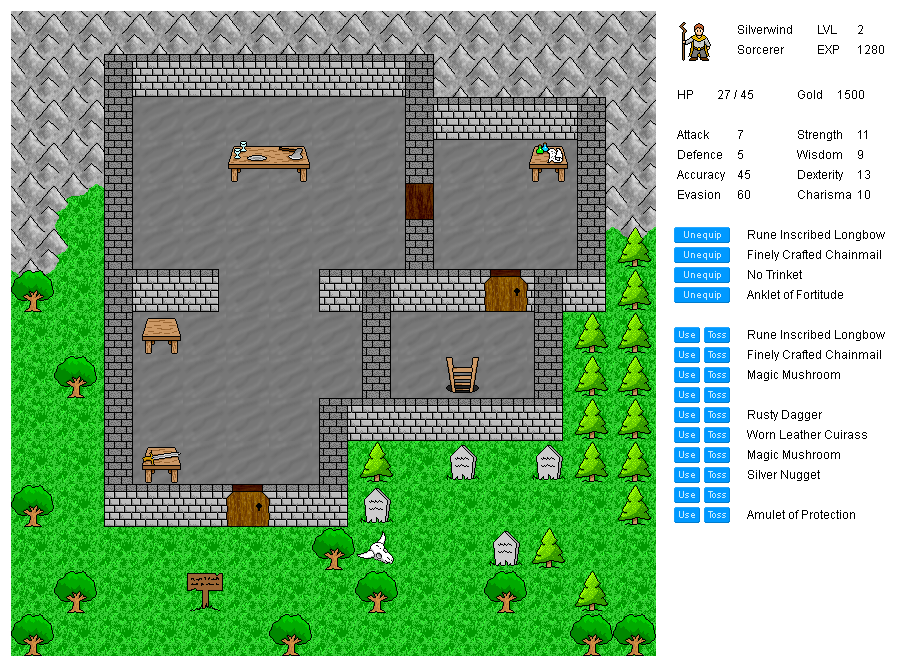
<style>
.page{position:relative;width:917px;height:667px;background:#ffffff}
.page>*{position:absolute;margin:0}
.t1{font:12px "ArialMT";color:#000000}
.t2{font:10px "ArialMT";color:#ccebff}
</style>
<div class="page">
<p class="t1" style="left:738px;top:25px;width:54px;height:9px">Silverwind</p>
<p class="t1" style="left:818px;top:25px;width:19px;height:9px">LVL</p>
<p class="t1" style="left:858px;top:25px;width:5px;height:9px">2</p>
<p class="t1" style="left:738px;top:45px;width:46px;height:9px">Sorcerer</p>
<p class="t1" style="left:818px;top:45px;width:21px;height:9px">EXP</p>
<p class="t1" style="left:858px;top:45px;width:26px;height:9px">1280</p>
<p class="t1" style="left:678px;top:90px;width:15px;height:9px">HP</p>
<p class="t1" style="left:718px;top:90px;width:35px;height:9px">27 / 45</p>
<p class="t1" style="left:798px;top:90px;width:24px;height:9px">Gold</p>
<p class="t1" style="left:838px;top:90px;width:26px;height:9px">1500</p>
<p class="t1" style="left:677px;top:130px;width:32px;height:9px">Attack</p>
<p class="t1" style="left:738px;top:130px;width:5px;height:9px">7</p>
<p class="t1" style="left:798px;top:130px;width:44px;height:11px">Strength</p>
<p class="t1" style="left:858px;top:130px;width:9px;height:9px">11</p>
<p class="t1" style="left:678px;top:150px;width:44px;height:9px">Defence</p>
<p class="t1" style="left:738px;top:150px;width:5px;height:9px">5</p>
<p class="t1" style="left:797px;top:150px;width:45px;height:9px">Wisdom</p>
<p class="t1" style="left:858px;top:150px;width:5px;height:9px">9</p>
<p class="t1" style="left:677px;top:170px;width:48px;height:11px">Accuracy</p>
<p class="t1" style="left:738px;top:170px;width:12px;height:9px">45</p>
<p class="t1" style="left:798px;top:170px;width:45px;height:11px">Dexterity</p>
<p class="t1" style="left:858px;top:170px;width:12px;height:9px">13</p>
<p class="t1" style="left:678px;top:190px;width:42px;height:9px">Evasion</p>
<p class="t1" style="left:738px;top:190px;width:12px;height:9px">60</p>
<p class="t1" style="left:798px;top:190px;width:53px;height:9px">Charisma</p>
<p class="t1" style="left:858px;top:190px;width:12px;height:9px">10</p>
<p class="t2" style="left:684px;top:231px;width:37px;height:9px">Unequip</p>
<p class="t1" style="left:748px;top:230px;width:137px;height:11px">Rune Inscribed Longbow</p>
<p class="t2" style="left:684px;top:251px;width:37px;height:9px">Unequip</p>
<p class="t1" style="left:748px;top:250px;width:133px;height:11px">Finely Crafted Chainmail</p>
<p class="t1" style="left:748px;top:270px;width:54px;height:9px">No Trinket</p>
<p class="t2" style="left:684px;top:271px;width:37px;height:9px">Unequip</p>
<p class="t2" style="left:684px;top:291px;width:37px;height:9px">Unequip</p>
<p class="t1" style="left:747px;top:290px;width:96px;height:9px">Anklet of Fortitude</p>
<p class="t2" style="left:679px;top:331px;width:16px;height:7px">Use</p>
<p class="t2" style="left:708px;top:331px;width:18px;height:7px">Toss</p>
<p class="t1" style="left:748px;top:330px;width:137px;height:11px">Rune Inscribed Longbow</p>
<p class="t2" style="left:679px;top:351px;width:16px;height:7px">Use</p>
<p class="t2" style="left:708px;top:351px;width:18px;height:7px">Toss</p>
<p class="t1" style="left:748px;top:350px;width:133px;height:11px">Finely Crafted Chainmail</p>
<p class="t2" style="left:679px;top:371px;width:16px;height:7px">Use</p>
<p class="t2" style="left:708px;top:371px;width:18px;height:7px">Toss</p>
<p class="t1" style="left:748px;top:370px;width:92px;height:11px">Magic Mushroom</p>
<p class="t2" style="left:679px;top:391px;width:16px;height:7px">Use</p>
<p class="t2" style="left:708px;top:391px;width:18px;height:7px">Toss</p>
<p class="t2" style="left:679px;top:411px;width:16px;height:7px">Use</p>
<p class="t2" style="left:708px;top:411px;width:18px;height:7px">Toss</p>
<p class="t1" style="left:748px;top:410px;width:74px;height:11px">Rusty Dagger</p>
<p class="t2" style="left:679px;top:431px;width:16px;height:7px">Use</p>
<p class="t2" style="left:708px;top:431px;width:18px;height:7px">Toss</p>
<p class="t1" style="left:747px;top:430px;width:120px;height:9px">Worn Leather Cuirass</p>
<p class="t2" style="left:679px;top:451px;width:16px;height:7px">Use</p>
<p class="t2" style="left:708px;top:451px;width:18px;height:7px">Toss</p>
<p class="t1" style="left:748px;top:450px;width:92px;height:11px">Magic Mushroom</p>
<p class="t2" style="left:679px;top:471px;width:16px;height:7px">Use</p>
<p class="t2" style="left:708px;top:471px;width:18px;height:7px">Toss</p>
<p class="t1" style="left:748px;top:470px;width:72px;height:11px">Silver Nugget</p>
<p class="t2" style="left:679px;top:491px;width:16px;height:7px">Use</p>
<p class="t2" style="left:708px;top:491px;width:18px;height:7px">Toss</p>
<p class="t1" style="left:747px;top:510px;width:108px;height:9px">Amulet of Protection</p>
<p class="t2" style="left:679px;top:511px;width:16px;height:7px">Use</p>
<p class="t2" style="left:708px;top:511px;width:18px;height:7px">Toss</p>
</div>
